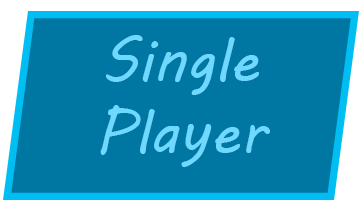
<style>
.page{position:relative;width:360px;height:216px;background:#0076a3}
.page>*{position:absolute;margin:0}
.t1{font:60px "MVBoli";color:#6ed9ff}
</style>
<div class="page">
<p class="t1" style="left:100px;top:35px;width:171px;height:132px;text-align:center">Single <br>Player</p>
</div>
